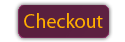
<style>
.page{position:relative;width:125px;height:42px;background:#ffffff}
.page>*{position:absolute;margin:0}
.t1{font:20.2px "MyriadPro-Regular";color:#ffae00}
</style>
<div class="page">
<p class="t1" style="left:24px;top:13px;width:79px;height:15px">Checkout</p>
</div>
